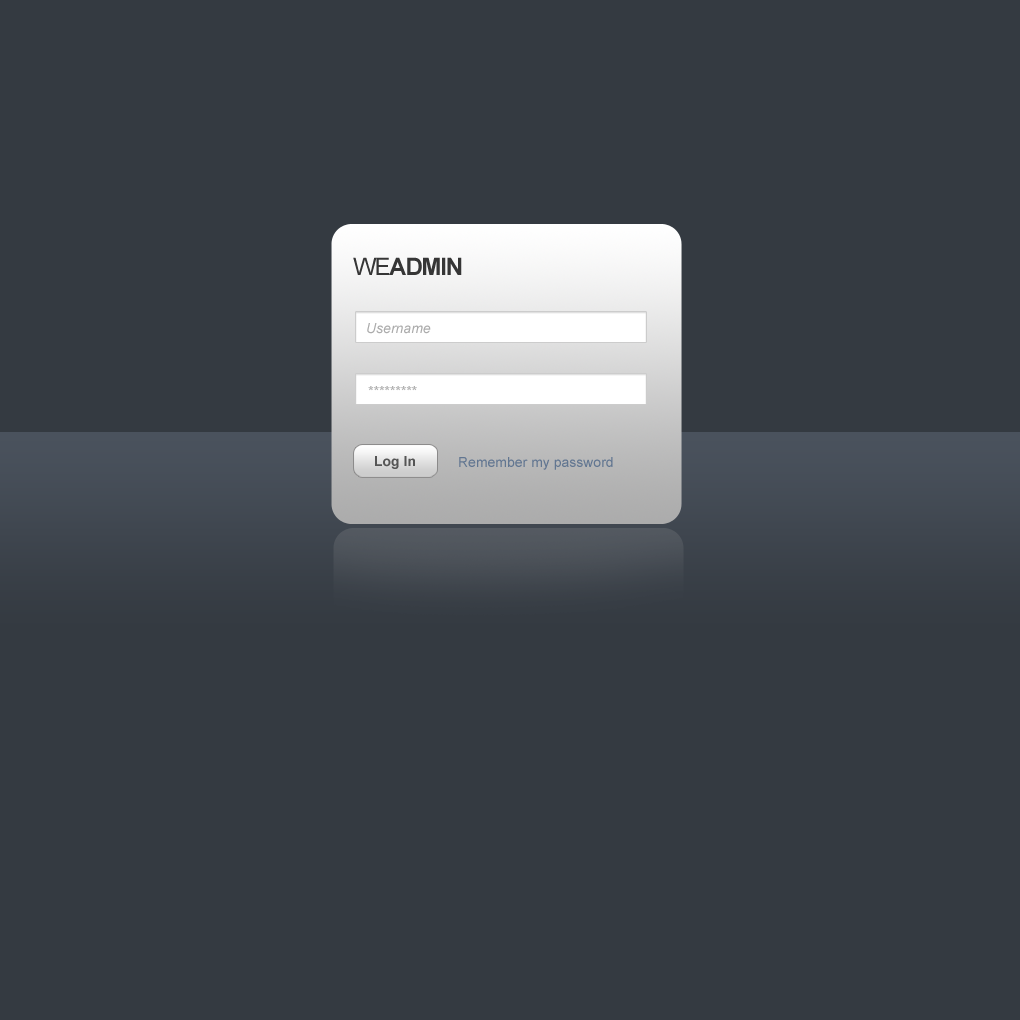
<style>
.page{position:relative;width:1020px;height:1020px;background:#343a41}
.page>*{position:absolute;margin:0}
.t1{font:24px "Arial-BoldMT";letter-spacing:-0.05em;color:#363636}
.t2{font:24px "ArialMT";letter-spacing:-0.05em;color:#363636}
.t3{font:14px "Arial-ItalicMT";color:#acacac}
.t4{font:14px "Arial-BoldMT";color:#555555}
.t5{font:14px "ArialMT";color:#627691}
</style>
<div class="page">
<p class="t1" style="left:353px;top:257px;width:109px;height:18px"><span class="t2">WE</span>ADMIN</p>
<p class="t3" style="left:367px;top:323px;width:64px;height:11px">Username</p>
<p class="t3" style="left:368px;top:386px;width:49px;height:5px">*********</p>
<p class="t4" style="left:375px;top:456px;width:40px;height:13px">Log In</p>
<p class="t5" style="left:459px;top:457px;width:154px;height:13px">Remember my password</p>
</div>
